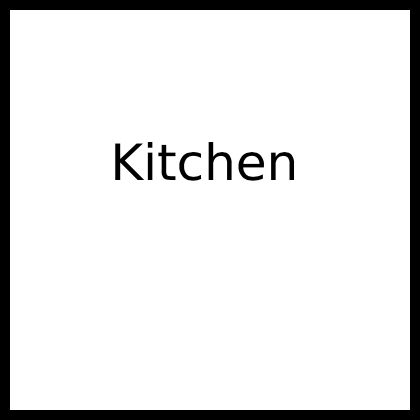
<style>
.page{position:relative;width:420px;height:420px;background:#ffffff}
.page>*{position:absolute;margin:0}
.t1{font:50px "DejaVuSans";color:#000000}
</style>
<div class="page">
<p class="t1" style="left:115px;top:142px;width:180px;height:39px">Kitchen</p>
</div>
